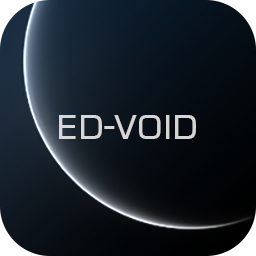
<style>
.page{position:relative;width:256px;height:256px}
.page>*{position:absolute;margin:0}
.t1{font:42.7px "EuroCaps";color:#d5d5d6}
</style>
<div class="page">
<p class="t1" style="left:59px;top:115px;width:137px;height:24px">ed-void</p>
</div>
